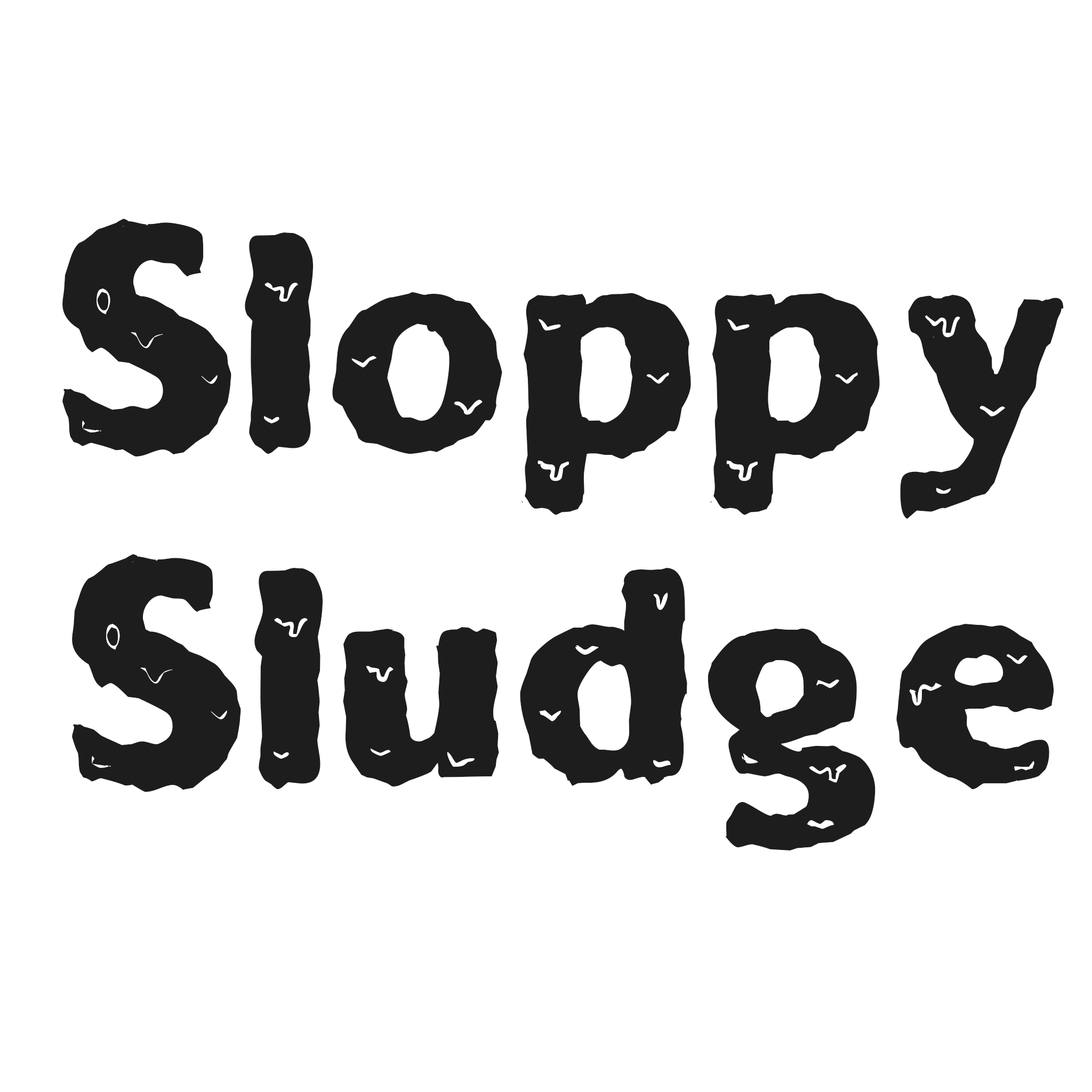
<style>
.page{position:relative;width:1092px;height:1092px;background:#ffffff}
.page>*{position:absolute;margin:0}
.t1{font:279.6px "SolidOoky";color:#1d1d1d}
</style>
<div class="page">
<p class="t1" style="left:62px;top:219px;width:1002px;height:631px;text-align:center">Sloppy<br>Sludge</p>
</div>
